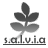
<style>
.page{position:relative;width:48px;height:48px;background:#ffffff}
.page>*{position:absolute;margin:0}
.t1{font:12px "BerlinSansFB-Reg";color:#484949}
</style>
<div class="page">
<p class="t1" style="left:4px;top:35px;width:42px;height:9px">s.a.l.v.i.a</p>
</div>
